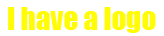
<style>
.page{position:relative;width:164px;height:36px;background:#ffffff}
.page>*{position:absolute;margin:0}
.t1{font:29.2px "Impact";color:#fffc03}
</style>
<div class="page">
<p class="t1" style="left:8px;top:7px;width:148px;height:26px">I have a logo</p>
</div>
